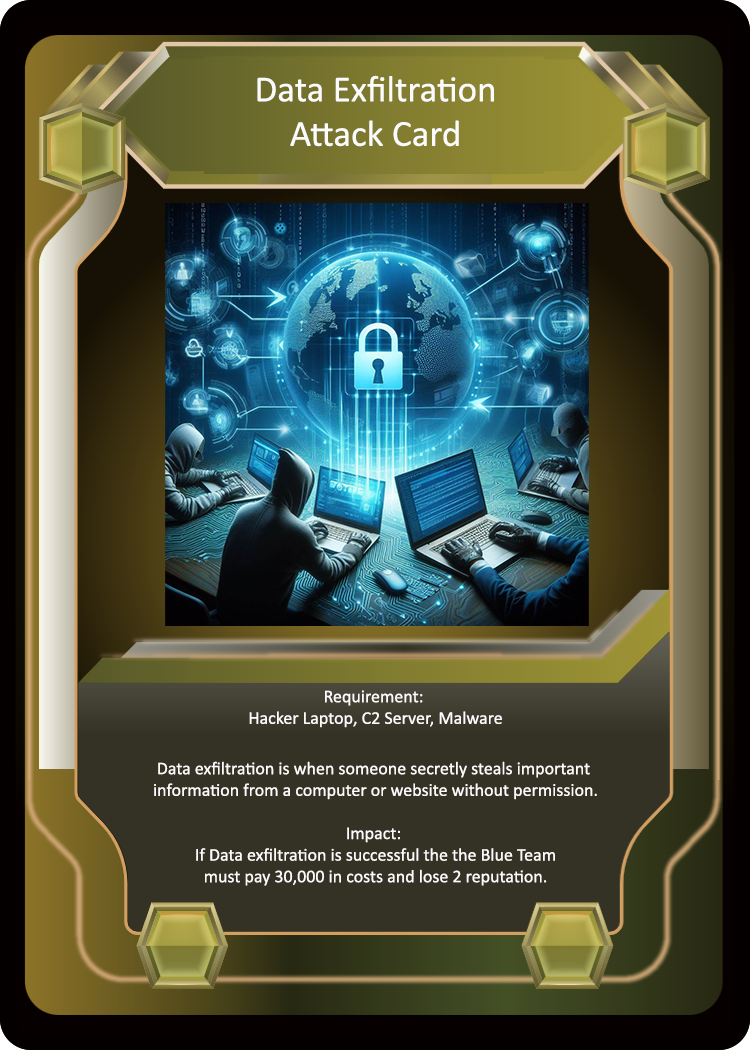
<style>
.page{position:relative;width:750px;height:1050px}
.page>*{position:absolute;margin:0}
.t1{font:37px "Calibri";color:#fcfbfb}
.t2{font:18px "Calibri";color:#fcfbfb}
</style>
<div class="page">
<p class="t1" style="left:257px;top:75px;width:237px;height:72px;text-align:center">Data Exfiltration<br>Attack Card</p>
<p class="t2" style="left:154px;top:690px;width:443px;height:196px;text-align:center">Requirement: <br>Hacker Laptop, C2 Server, Malware<br><br>Data exfiltration is when someone secretly steals important <br>information from a computer or website without permission.<br><br>Impact: <br>If Data exfiltration is successful the the Blue Team<br>must pay 30,000 in costs and lose 2 reputation.</p>
</div>
